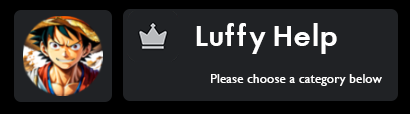
<style>
.page{position:relative;width:410px;height:114px;background:#202225}
.page>*{position:absolute;margin:0}
.t1{font:27.5px "AFuturaOrtoBold";color:#ffffff}
.t2{font:13.3px "GillSansMT";color:#ffffff}
</style>
<div class="page">
<p class="t1" style="left:196px;top:23px;width:141px;height:31px">Luffy Help</p>
<p class="t2" style="left:211px;top:74px;width:171px;height:12px">Please choose a category below</p>
</div>
